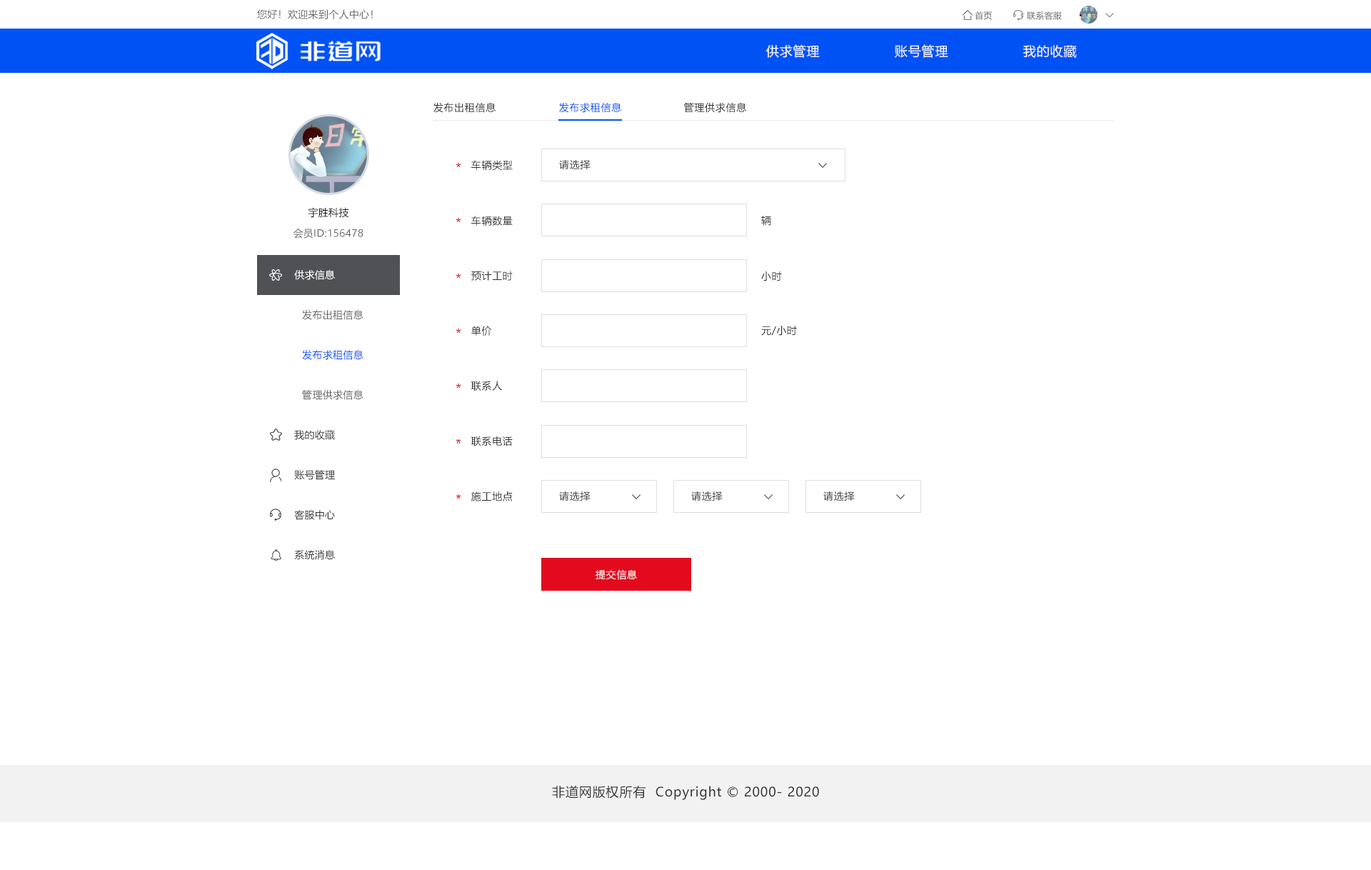
<style>
.page{position:relative;width:1371px;height:870px;background:#ffffff}
.page>*{position:absolute;margin:0}
.t1{font:10px "MicrosoftYaHei";letter-spacing:0.022em;color:#666666}
.t2{font:8.6px "MicrosoftYaHei";letter-spacing:0.022em;color:#666666}
.t3{font:12.9px "MicrosoftYaHei";letter-spacing:0.05em;color:#ffffff}
.t4{font:10px "MicrosoftYaHei";letter-spacing:0.05em;color:#333333}
.t5{font:10px "MicrosoftYaHei";letter-spacing:0.05em;color:#0152f5}
.t6{font:10px "MicrosoftYaHei";letter-spacing:0.022em;color:#141414}
.t7{font:10px "MicrosoftYaHei";letter-spacing:0.022em;color:#ffffff}
.t8{font:10px "MicrosoftYaHei";letter-spacing:0.022em;color:#0152f5}
.t9{font:10px "MicrosoftYaHei";letter-spacing:0.022em;color:#333333}
.t10{font:10px "MicrosoftYaHei";letter-spacing:0.05em;color:#fefefe}
.t11{font:12.9px "MicrosoftYaHei";letter-spacing:0.05em;color:#333333}
</style>
<div class="page">
<p class="t1" style="left:257px;top:9px;width:116px;height:10px">您好！欢迎来到个人中心！</p>
<p class="t2" style="left:975px;top:11px;width:17px;height:9px">首页</p>
<p class="t2" style="left:1027px;top:11px;width:35px;height:9px">联系客服</p>
<p class="t3" style="left:765px;top:44px;width:55px;height:14px">供求管理</p>
<p class="t3" style="left:895px;top:44px;width:53px;height:14px">账号管理</p>
<p class="t3" style="left:1023px;top:45px;width:54px;height:13px">我的收藏</p>
<p class="t4" style="left:433px;top:102px;width:63px;height:11px">发布出租信息</p>
<p class="t5" style="left:559px;top:102px;width:63px;height:11px">发布求租信息</p>
<p class="t4" style="left:684px;top:102px;width:63px;height:11px">管理供求信息</p>
<p class="t4" style="left:471px;top:160px;width:42px;height:10px">车辆类型</p>
<p class="t4" style="left:559px;top:160px;width:32px;height:9px">请选择</p>
<p class="t6" style="left:308px;top:207px;width:41px;height:11px">宇胜科技</p>
<p class="t4" style="left:471px;top:216px;width:42px;height:10px">车辆数量</p>
<p class="t4" style="left:761px;top:216px;width:10px;height:10px">辆</p>
<p class="t1" style="left:293px;top:229px;width:70px;height:10px">会员ID:156478</p>
<p class="t7" style="left:294px;top:270px;width:41px;height:10px">供求信息</p>
<p class="t4" style="left:471px;top:271px;width:42px;height:10px">预计工时</p>
<p class="t4" style="left:761px;top:271px;width:21px;height:10px">小时</p>
<p class="t1" style="left:302px;top:310px;width:61px;height:10px">发布出租信息</p>
<p class="t4" style="left:471px;top:326px;width:21px;height:10px">单价</p>
<p class="t4" style="left:761px;top:326px;width:36px;height:10px">元/小时</p>
<p class="t8" style="left:302px;top:350px;width:61px;height:10px">发布求租信息</p>
<p class="t1" style="left:302px;top:390px;width:61px;height:10px">管理供求信息</p>
<p class="t4" style="left:471px;top:381px;width:31px;height:10px">联系人</p>
<p class="t9" style="left:294px;top:430px;width:41px;height:10px">我的收藏</p>
<p class="t4" style="left:471px;top:436px;width:42px;height:10px">联系电话</p>
<p class="t9" style="left:294px;top:470px;width:41px;height:10px">账号管理</p>
<p class="t4" style="left:471px;top:491px;width:42px;height:10px">施工地点</p>
<p class="t4" style="left:559px;top:491px;width:32px;height:10px">请选择</p>
<p class="t4" style="left:691px;top:491px;width:32px;height:10px">请选择</p>
<p class="t4" style="left:823px;top:491px;width:32px;height:10px">请选择</p>
<p class="t9" style="left:294px;top:510px;width:41px;height:10px">客服中心</p>
<p class="t9" style="left:294px;top:550px;width:41px;height:10px">系统消息</p>
<p class="t10" style="left:596px;top:569px;width:41px;height:11px">提交信息</p>
<p class="t11" style="left:552px;top:785px;width:267px;height:15px">非道网版权所有  Copyright © 2000- 2020</p>
</div>
